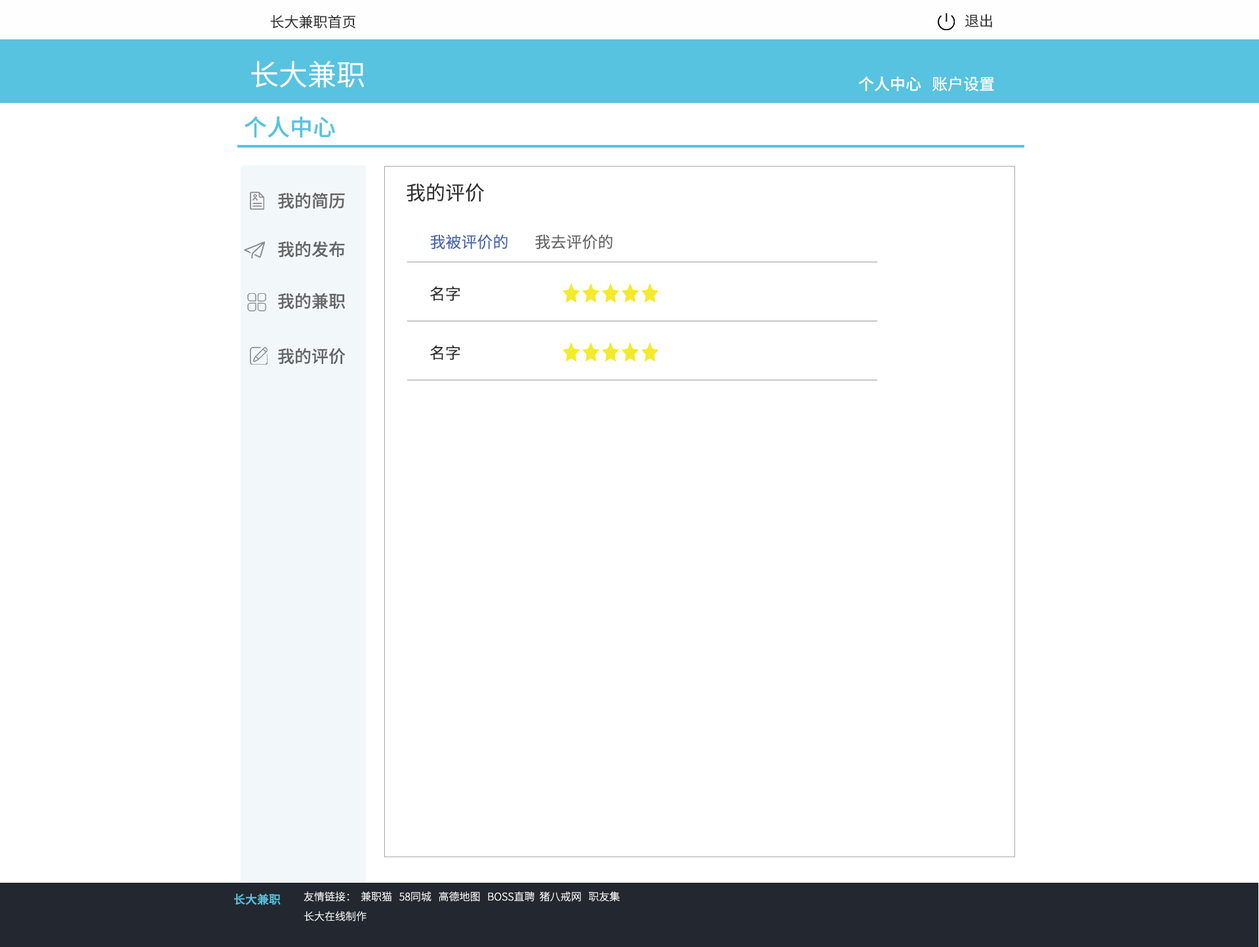
<style>
.page{position:relative;width:1259px;height:947px;background:#ffffff}
.page>*{position:absolute;margin:0}
.t1{font:14.4px "SourceHanSansCN-Normal";color:#333333}
.t2{font:28.9px "SourceHanSansCN-Normal";color:#ffffff}
.t3{font:15.7px "SourceHanSansCN-Medium";color:#ffffff}
.t4{font:15.7px "SourceHanSansCN-Regular";color:#ffffff}
.t5{font:23px "SourceHanSansCN-Medium";color:#57c3e0}
.t6{font:19.7px "SourceHanSansCN-Regular";color:#333333}
.t7{font:17.1px "SourceHanSansCN-Medium";color:#666666}
.t8{font:15.7px "SourceHanSansCN-Regular";color:#4a67af}
.t9{font:15.7px "SourceHanSansCN-Regular";color:#666666}
.t10{font:15.7px "SourceHanSansCN-Regular";color:#333333}
.t11{font:11.8px "SourceHanSansCN-Medium";color:#57c3e0}
.t12{font:10.5px "SourceHanSansCN-Light";color:#ffffff}
</style>
<div class="page">
<p class="t1" style="left:270px;top:15px;width:85px;height:14px">长大兼职首页</p>
<p class="t1" style="left:965px;top:14px;width:27px;height:14px">退出</p>
<p class="t2" style="left:251px;top:61px;width:113px;height:27px">长大兼职</p>
<p class="t3" style="left:858px;top:76px;width:136px;height:15px">个人中心<span class="t4">   账户设置</span></p>
<p class="t5" style="left:245px;top:116px;width:90px;height:22px">个人中心</p>
<p class="t6" style="left:407px;top:183px;width:78px;height:19px">我的评价</p>
<p class="t7" style="left:278px;top:192px;width:67px;height:17px">我的简历</p>
<p class="t7" style="left:278px;top:241px;width:67px;height:17px">我的发布</p>
<p class="t8" style="left:430px;top:234px;width:78px;height:15px">我被评价的</p>
<p class="t9" style="left:535px;top:234px;width:78px;height:15px">我去评价的</p>
<p class="t7" style="left:278px;top:292px;width:67px;height:18px">我的兼职</p>
<p class="t10" style="left:430px;top:286px;width:30px;height:15px">名字</p>
<p class="t7" style="left:278px;top:348px;width:68px;height:17px">我的评价</p>
<p class="t10" style="left:430px;top:345px;width:30px;height:15px">名字</p>
<p class="t11" style="left:234px;top:893px;width:47px;height:12px">长大兼职</p>
<p class="t12" style="left:304px;top:891px;width:316px;height:11px">友情链接：  兼职猫   58同城   高德地图   BOSS直聘  猪八戒网   职友集</p>
<p class="t12" style="left:304px;top:911px;width:63px;height:10px">长大在线制作</p>
</div>
